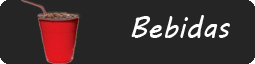
<style>
.page{position:relative;width:255px;height:64px;background:#252525}
.page>*{position:absolute;margin:0}
.t1{font:30px "MVBoli";color:#ffffff}
</style>
<div class="page">
<p class="t1" style="left:131px;top:15px;width:99px;height:23px">Bebidas</p>
</div>
